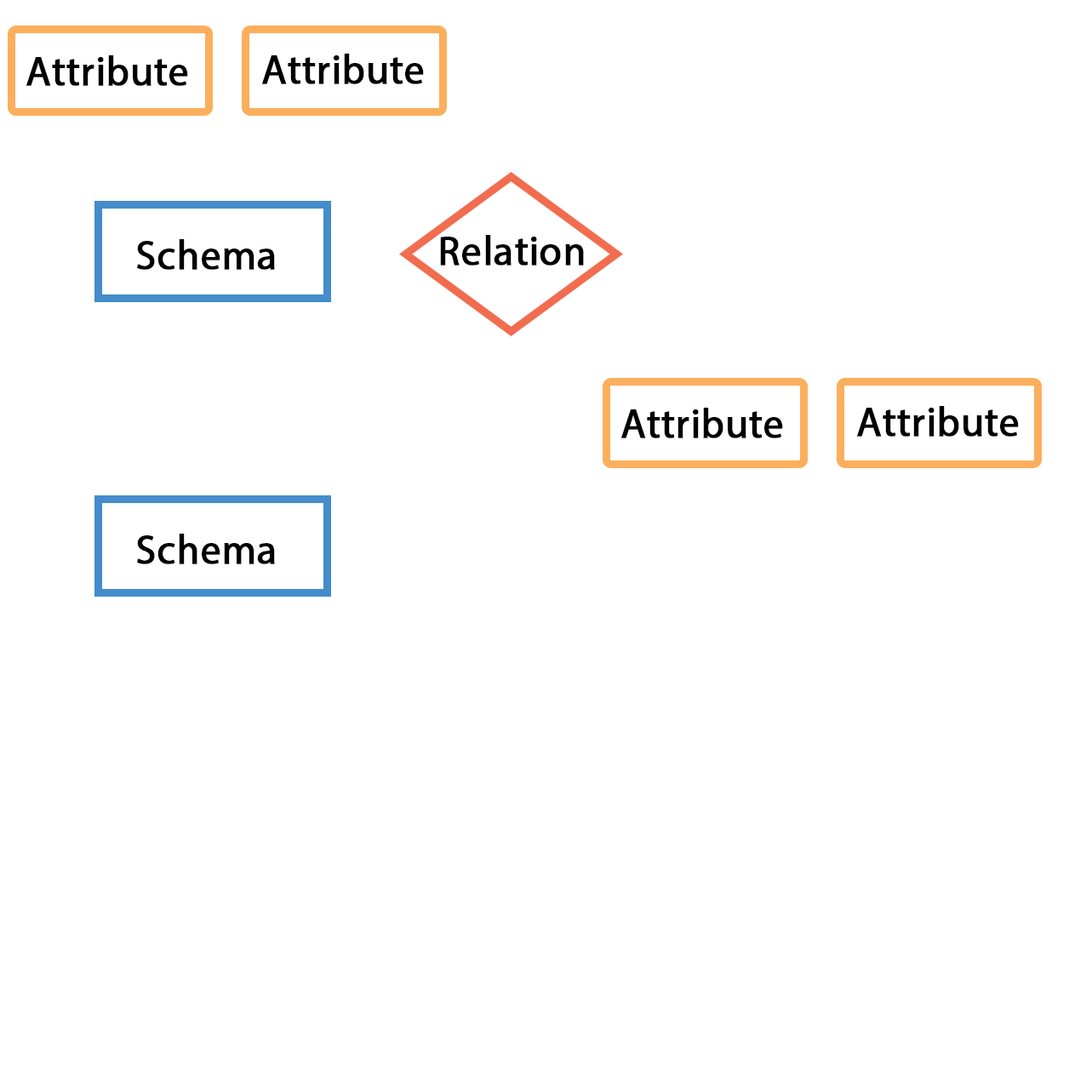
<style>
.page{position:relative;width:1092px;height:1092px;background:#ffffff}
.page>*{position:absolute;margin:0}
.t1{font:40.9px "MyriadPro-Regular";color:#000000;font-weight:bold}
</style>
<div class="page">
<p class="t1" style="left:262px;top:54px;width:162px;height:30px">Attribute</p>
<p class="t1" style="left:26px;top:55px;width:162px;height:31px">Attribute</p>
<p class="t1" style="left:137px;top:239px;width:138px;height:31px">Schema</p>
<p class="t1" style="left:440px;top:235px;width:144px;height:31px">Relation</p>
<p class="t1" style="left:621px;top:408px;width:162px;height:30px">Attribute</p>
<p class="t1" style="left:857px;top:406px;width:162px;height:31px">Attribute</p>
<p class="t1" style="left:137px;top:534px;width:138px;height:30px">Schema</p>
</div>
